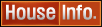
<style>
.page{position:relative;width:102px;height:27px}
.page>*{position:absolute;margin:0}
.t1{font:17px "H2hdrM"}
</style>
<div class="page">
<p class="t1" style="left:6px;top:4px;width:90px;height:16px">House Info.</p>
</div>
